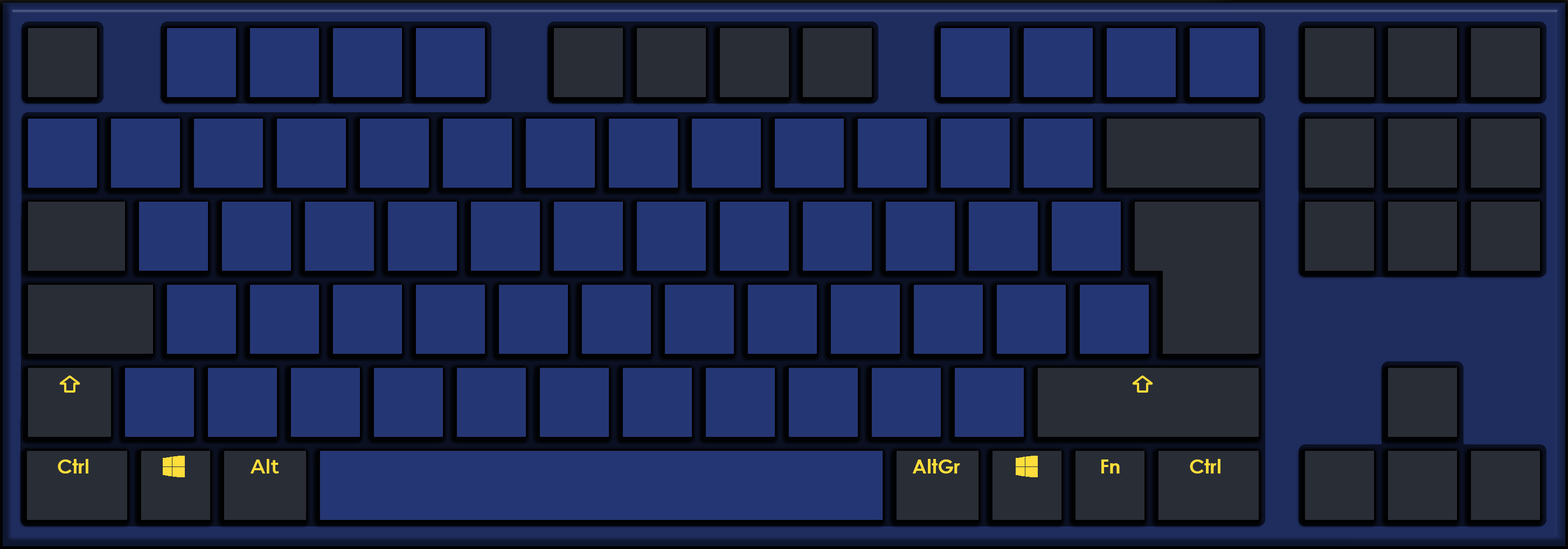
<style>
.page{position:relative;width:1568px;height:549px;background:#253674}
.page>*{position:absolute;margin:0}
.t1{font:19.4px "Montserrat-SemiBold";color:#ffdd3b}
.t2{font:19.4px "CenturyGothic-Bold";color:#ffdd3b}
</style>
<div class="page">
<p class="t1" style="left:250px;top:459px;width:29px;height:14px">Alt</p>
<p class="t2" style="left:912px;top:459px;width:48px;height:14px">AltGr</p>
<p class="t2" style="left:1101px;top:459px;width:19px;height:14px">Fn</p>
</div>
